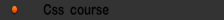
<style>
.page{position:relative;width:224px;height:20px;background:#333333}
.page>*{position:absolute;margin:0}
.t1{font:14.9px "ArialRoundedMTBold";color:#030303;scale:0.78 1}
</style>
<div class="page">
<p class="t1" style="left:43px;top:4px;width:66px;height:11px">Css  course</p>
</div>
